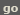
<style>
.page{position:relative;width:20px;height:15px;background:#5a5a5a}
.page>*{position:absolute;margin:0}
.t1{font:11px "Verdana-Bold";color:#dedbcb}
</style>
<div class="page">
<p class="t1" style="left:3px;top:6px;width:15px;height:8px">go</p>
</div>
